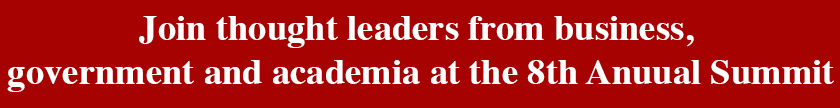
<style>
.page{position:relative;width:840px;height:108px;background:#a60201}
.page>*{position:absolute;margin:0}
.t1{font:36.6px "Times-Bold";color:#ffffff}
</style>
<div class="page">
<p class="t1" style="left:7px;top:16px;width:827px;height:76px;text-align:center">Join thought leaders from business, <br>government and academia at the 8th Anuual Summit</p>
</div>
